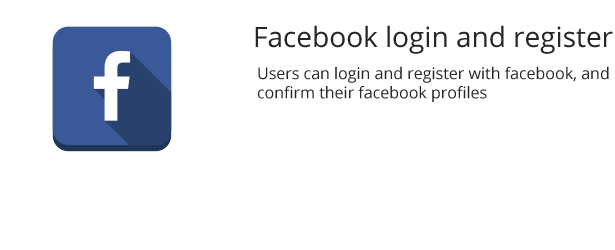
<style>
.page{position:relative;width:615px;height:250px;background:#ffffff}
.page>*{position:absolute;margin:0}
.t1{font:28px "OpenSans";color:#262626}
.t2{font:16px "OpenSans";color:#262626}
</style>
<div class="page">
<p class="t1" style="left:255px;top:25px;width:358px;height:29px">Facebook login and register</p>
<p class="t2" style="left:258px;top:66px;width:351px;height:36px">Users can login and register with facebook, and <br>confirm their facebook profiles</p>
</div>
